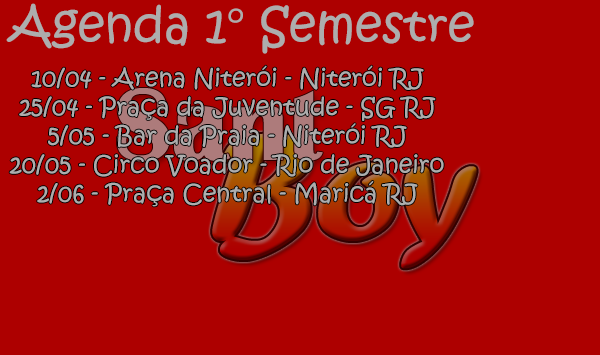
<style>
.page{position:relative;width:600px;height:355px;background:#ad0000}
.page>*{position:absolute;margin:0}
.t1{font:48px "KristenITC-Regular";color:#adadad}
.t2{font:24px "KristenITC-Regular";color:#adadad}
</style>
<div class="page">
<p class="t1" style="left:6px;top:3px;width:468px;height:51px">Agenda 1° Semestre</p>
<p class="t2" style="left:9px;top:65px;width:435px;height:142px;text-align:center">10/04 - Arena Niterói - Niterói RJ<br>25/04 - Praça da Juventude - SG RJ<br>5/05 - Bar da Praia - Niterói RJ<br>20/05 - Circo Voador - Rio de Janeiro<br>2/06 - Praça Central - Maricá RJ</p>
</div>
